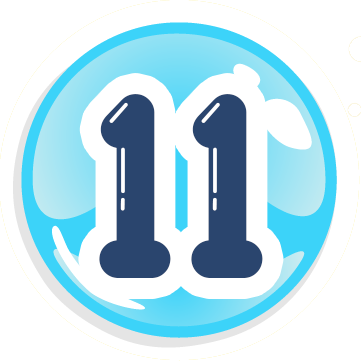
<style>
.page{position:relative;width:361px;height:364px;background:#ffffff}
.page>*{position:absolute;margin:0}
.t1{font:262.5px "BubbleBobble";color:#2a456e}
</style>
<div class="page">
<p class="t1" style="left:99px;top:94px;width:164px;height:184px">11</p>
</div>
